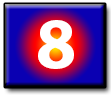
<style>
.page{position:relative;width:111px;height:96px}
.page>*{position:absolute;margin:0}
.t1{font:72px "MyriadPro-Bold";color:#ffffff}
</style>
<div class="page">
<p class="t1" style="left:38px;top:20px;width:36px;height:49px">8</p>
</div>
